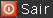
<style>
.page{position:relative;width:53px;height:18px;background:#333333}
.page>*{position:absolute;margin:0}
.t1{font:14px "Tahoma";letter-spacing:0.1em;color:#fcfcfe}
</style>
<div class="page">
<p class="t1" style="left:22px;top:4px;width:27px;height:10px">Sair</p>
</div>
